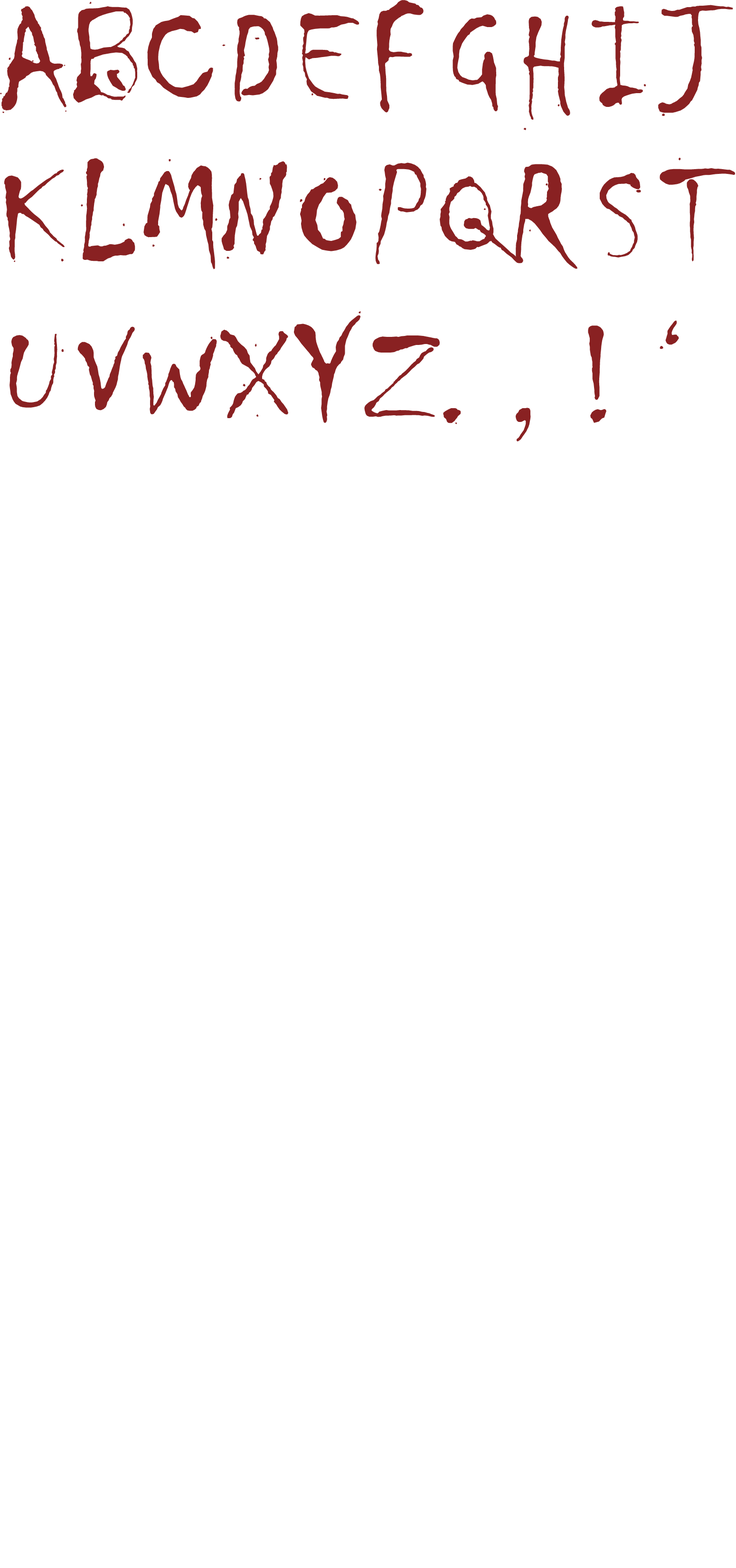
<style>
.page{position:relative;width:736px;height:1568px;background:#ffffff}
.page>*{position:absolute;margin:0}
.t1{font:142.5px "Chiller-Regular";letter-spacing:-0.025em;color:#892122}
.t2{font:130.7px "Chiller-Regular";letter-spacing:-0.025em;color:#892122}
</style>
<div class="page">
<p class="t1" style="left:73px;top:1px;width:64px;height:102px">B</p>
<p class="t1" style="left:377px;top:0px;width:47px;height:113px">F</p>
<p class="t1" style="left:659px;top:5px;width:75px;height:111px">J</p>
<p class="t1" style="left:0px;top:6px;width:67px;height:107px">A</p>
<p class="t1" style="left:147px;top:15px;width:66px;height:83px">C</p>
<p class="t1" style="left:222px;top:15px;width:56px;height:87px">D</p>
<p class="t1" style="left:300px;top:13px;width:60px;height:86px">E</p>
<p class="t1" style="left:453px;top:14px;width:45px;height:98px">G</p>
<p class="t1" style="left:524px;top:16px;width:47px;height:114px">H</p>
<p class="t1" style="left:592px;top:6px;width:54px;height:101px">I</p>
<p class="t1" style="left:81px;top:158px;width:54px;height:103px">L</p>
<p class="t1" style="left:143px;top:159px;width:75px;height:110px">M</p>
<p class="t1" style="left:221px;top:161px;width:66px;height:98px">N</p>
<p class="t1" style="left:660px;top:158px;width:76px;height:103px">T</p>
<p class="t1" style="left:4px;top:170px;width:61px;height:92px">K</p>
<p class="t1" style="left:375px;top:163px;width:52px;height:101px">P</p>
<p class="t1" style="left:516px;top:164px;width:62px;height:105px">R</p>
<p class="t1" style="left:600px;top:173px;width:41px;height:85px">S</p>
<p class="t1" style="left:300px;top:177px;width:57px;height:74px">O</p>
<p class="t1" style="left:440px;top:176px;width:81px;height:87px">Q</p>
<p class="t1" style="left:294px;top:311px;width:67px;height:112px">Y</p>
<p class="t1" style="left:77px;top:326px;width:58px;height:85px">V</p>
<p class="t1" style="left:220px;top:330px;width:68px;height:88px">X</p>
<p class="t1" style="left:588px;top:325px;width:19px;height:98px">!</p>
<p class="t1" style="left:660px;top:320px;width:19px;height:29px">‘</p>
<p class="t1" style="left:10px;top:334px;width:54px;height:74px">U</p>
<p class="t2" style="left:143px;top:336px;width:74px;height:78px">W</p>
<p class="t1" style="left:364px;top:335px;width:76px;height:82px">Z</p>
<p class="t1" style="left:443px;top:408px;width:18px;height:16px">.</p>
<p class="t1" style="left:516px;top:408px;width:15px;height:33px">,</p>
</div>
